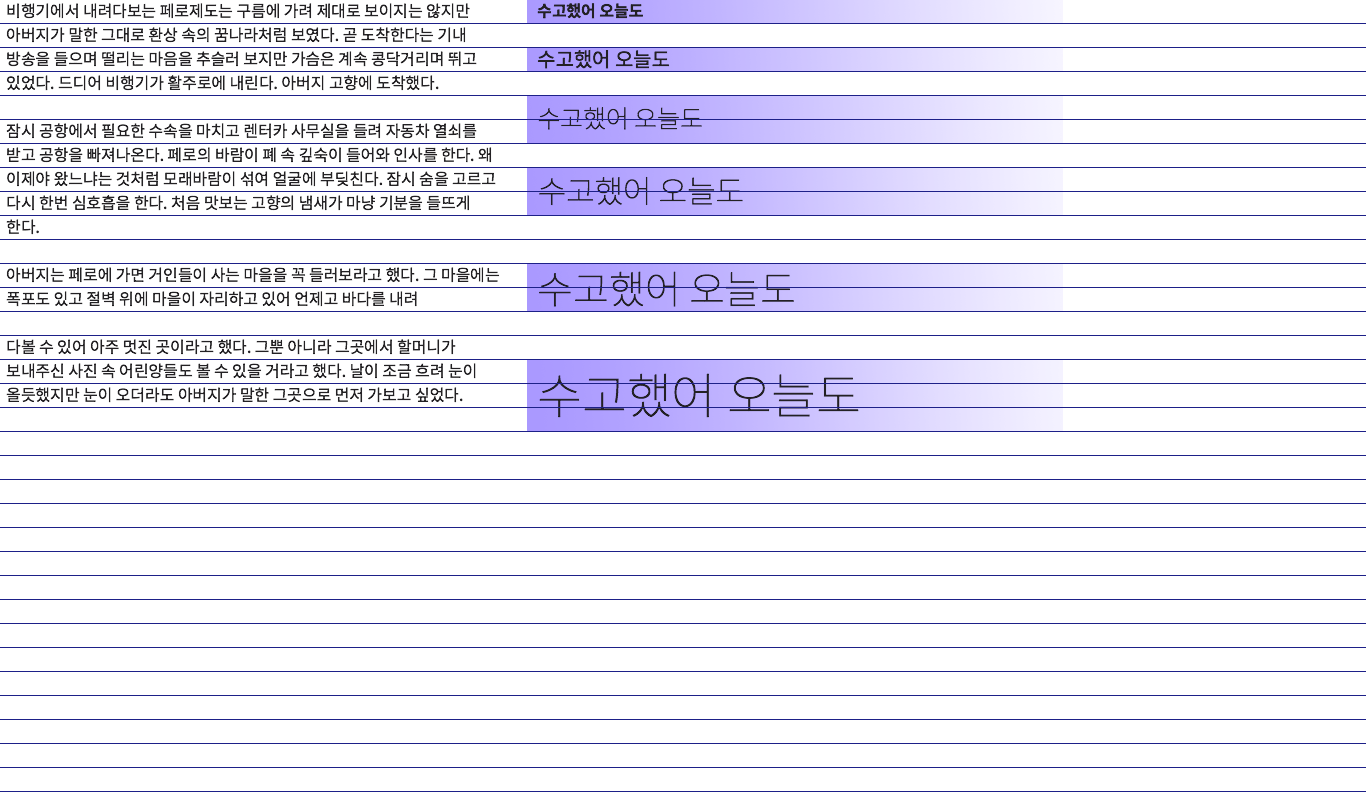
<style>
.page{position:relative;width:1366px;height:800px;background:#ffffff}
.page>*{position:absolute;margin:0}
.t1{font:16px "SpoqaHanSans-Regular";letter-spacing:-0.005em;color:#232124}
.t2{font:16px "SpoqaHanSans-Bold";letter-spacing:-0.005em;color:#232124}
.t3{font:20px "SpoqaHanSans-Regular";letter-spacing:-0.005em;color:#232124}
.t4{font:25px "SpoqaHanSans-Thin";letter-spacing:-0.005em;color:#232124}
.t5{font:31.2px "SpoqaHanSans-Thin";letter-spacing:-0.005em;color:#232124}
.t6{font:39.1px "SpoqaHanSans-Thin";letter-spacing:-0.005em;color:#232124}
.t7{font:48.8px "SpoqaHanSans-Thin";letter-spacing:-0.005em;color:#232124}
</style>
<div class="page">
<p class="t1" style="left:6px;top:3px;width:494px;height:400px">비행기에서 내려다보는 페로제도는 구름에 가려 제대로 보이지는 않지만 아버지가 말한 그대로 환상 속의 꿈나라처럼 보였다. 곧 도착한다는 기내 방송을 들으며 떨리는 마음을 추슬러 보지만 가슴은 계속 콩닥거리며 뛰고 있었다. 드디어 비행기가 활주로에 내린다. 아버지 고향에 도착했다.<br>잠시 공항에서 필요한 수속을 마치고 렌터카 사무실을 들려 자동차 열쇠를 받고 공항을 빠져나온다. 페로의 바람이 폐 속 깊숙이 들어와 인사를 한다. 왜 이제야 왔느냐는 것처럼 모래바람이 섞여 얼굴에 부딪친다. 잠시 숨을 고르고 다시 한번 심호흡을 한다. 처음 맛보는 고향의 냄새가 마냥 기분을 들뜨게 한다.<br>아버지는 페로에 가면 거인들이 사는 마을을 꼭 들러보라고 했다. 그 마을에는 폭포도 있고 절벽 위에 마을이 자리하고 있어 언제고 바다를 내려<br>다볼 수 있어 아주 멋진 곳이라고 했다. 그뿐 아니라 그곳에서 할머니가 보내주신 사진 속 어린양들도 볼 수 있을 거라고 했다. 날이 조금 흐려 눈이 올듯했지만 눈이 오더라도 아버지가 말한 그곳으로 먼저 가보고 싶었다.</p>
<p class="t2" style="left:537px;top:3px;width:106px;height:16px">수고했어 오늘도</p>
<p class="t3" style="left:537px;top:50px;width:133px;height:19px">수고했어 오늘도</p>
<p class="t4" style="left:538px;top:107px;width:164px;height:23px">수고했어 오늘도</p>
<p class="t5" style="left:539px;top:176px;width:204px;height:30px">수고했어 오늘도</p>
<p class="t6" style="left:539px;top:271px;width:255px;height:36px">수고했어 오늘도</p>
<p class="t7" style="left:539px;top:373px;width:320px;height:45px">수고했어 오늘도</p>
</div>
